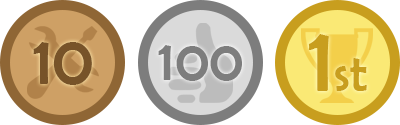
<style>
.page{position:relative;width:400px;height:125px;background:#ffffff}
.page>*{position:absolute;margin:0}
.t1{font:52.3px "BerlinSansFB-Reg";color:#c89e1e}
.t2{font:93px "BerlinSansFB-Reg";color:#c89e1e}
.t3{font:69.8px "BerlinSansFB-Reg";color:#775329}
.t4{font:58.1px "BerlinSansFB-Reg";color:#7d7d7d}
</style>
<div class="page">
<p class="t1" style="left:308px;top:34px;width:59px;height:57px"><span class="t2">1</span>st</p>
<p class="t3" style="left:33px;top:42px;width:59px;height:43px">10</p>
<p class="t4" style="left:158px;top:45px;width:84px;height:36px">100</p>
</div>
